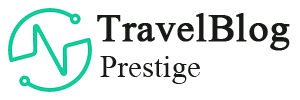
<style>
.page{position:relative;width:300px;height:100px;background:#ffffff}
.page>*{position:absolute;margin:0}
.t1{font:40.2px "MongolianBaiti";color:#171a16;font-weight:bold}
.t2{font:31.4px "MongolianBaiti";color:#171a16}
</style>
<div class="page">
<p class="t1" style="left:97px;top:13px;width:193px;height:38px">TravelBlog</p>
<p class="t2" style="left:100px;top:56px;width:100px;height:28px">Prestige</p>
</div>
